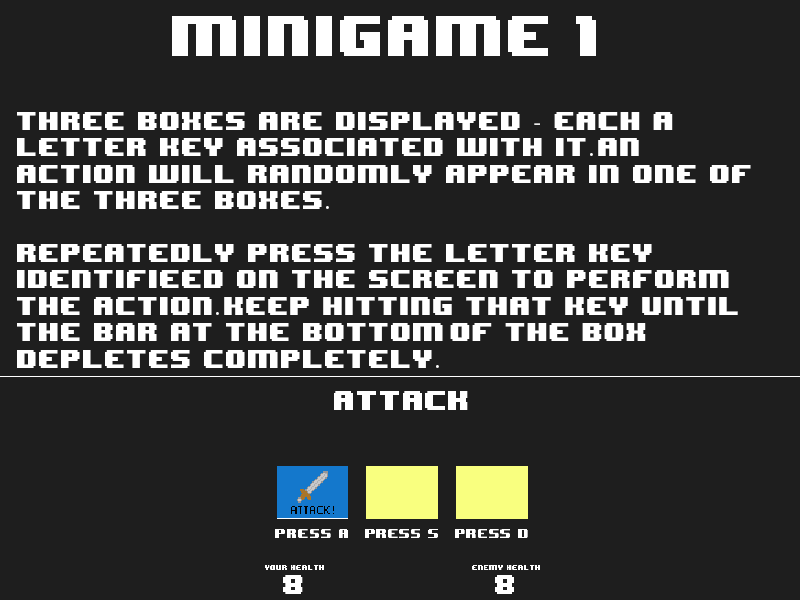
<style>
.page{position:relative;width:800px;height:600px;background:#1e1e1e}
.page>*{position:absolute;margin:0}
.t1{font:48px "8BITWONDERNominal";color:#ffffff}
.t2{font:22px "8BITWONDERNominal";color:#ffffff}
.t3{font:22px "MyriadPro-Regular";color:#ffffff}
</style>
<div class="page">
<p class="t1" style="left:172px;top:16px;width:424px;height:40px">minigame 1</p>
<p class="t2" style="left:17px;top:112px;width:734px;height:256px">three boxes are displayed <span class="t3">-   </span>each a <br>letter key associated with it<span class="t3">. </span>an<br>action will randomly appear in one of <br>the three boxes<span class="t3">.<br><br></span>repeatedly press the letter key<br>identifieed on the screen to perform<br>the action<span class="t3">. </span>keep hitting that key until <br>the bar at the bottom of the box <br>depletes completely<span class="t3">.</span></p>
</div>
